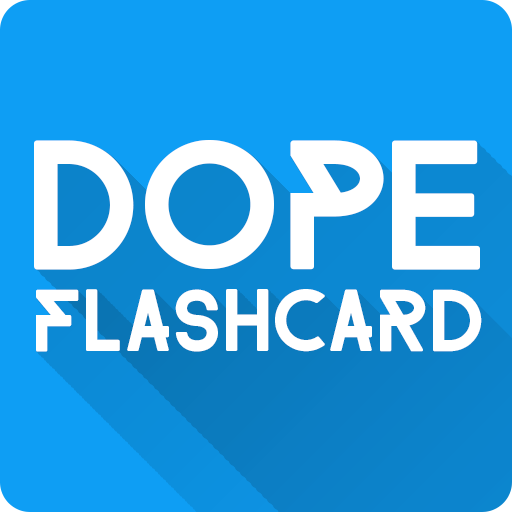
<style>
.page{position:relative;width:512px;height:512px;background:#0e9ef4}
.page>*{position:absolute;margin:0}
.t1{font:150px "FARRAY-Regular";color:#ffffff}
.t2{font:72px "FARRAY-Regular";color:#ffffff}
</style>
<div class="page">
<p class="t1" style="left:34px;top:140px;width:446px;height:130px">dope</p>
<p class="t2" style="left:36px;top:289px;width:446px;height:63px">Flashcard</p>
</div>
